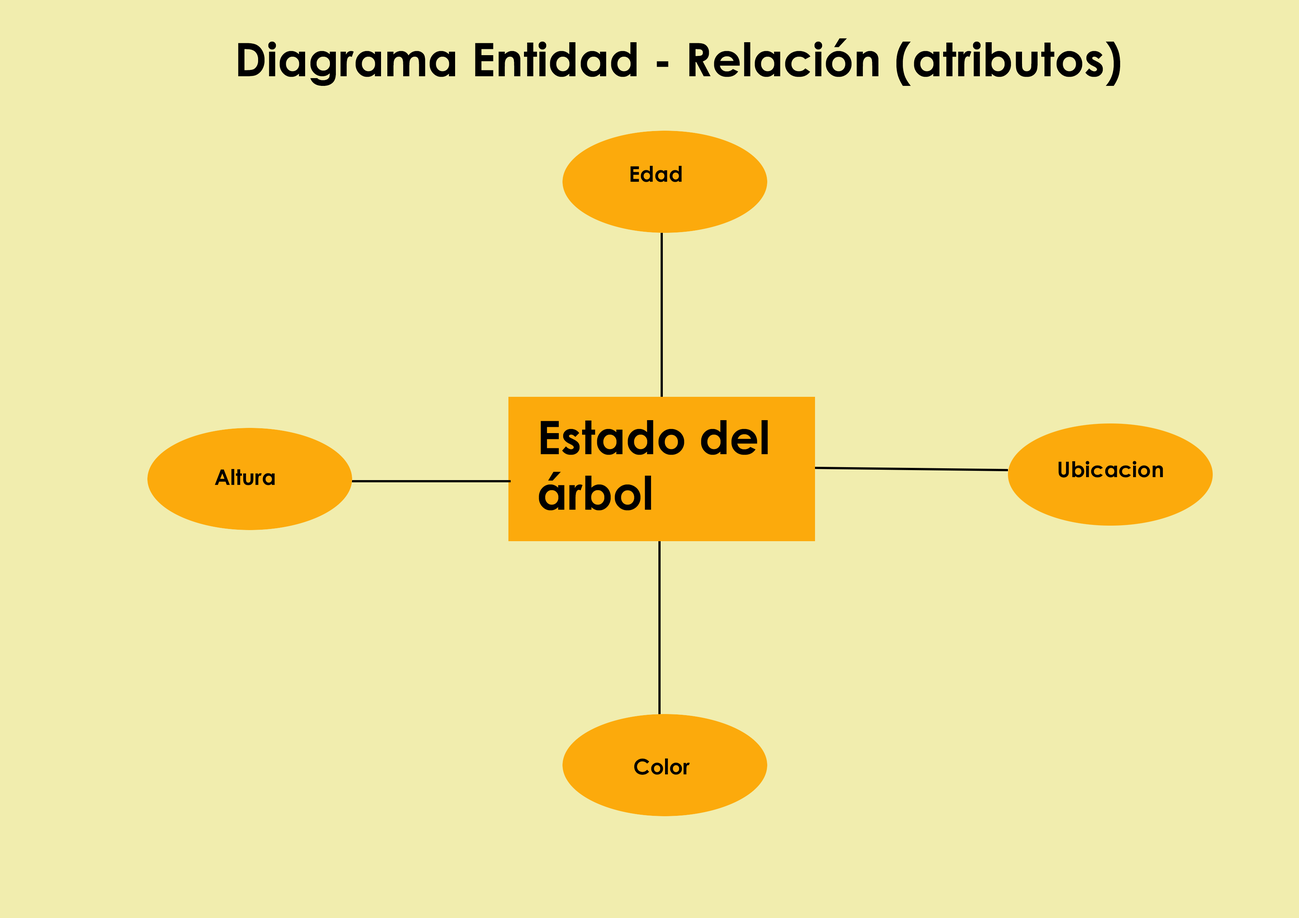
<style>
.page{position:relative;width:1299px;height:918px;background:#f1edae}
.page>*{position:absolute;margin:0}
.t1{font:46.3px "CenturyGothic-Bold";color:#000000}
.t2{font:21.6px "CenturyGothic-Bold";color:#000000}
</style>
<div class="page">
<p class="t1" style="left:238px;top:38px;width:882px;height:48px">Diagrama Entidad - Relación (atributos)</p>
<p class="t2" style="left:630px;top:166px;width:52px;height:16px">Edad</p>
<p class="t1" style="left:539px;top:420px;width:229px;height:91px">Estado del árbol</p>
<p class="t2" style="left:1058px;top:461px;width:105px;height:17px">Ubicacion</p>
<p class="t2" style="left:215px;top:469px;width:60px;height:16px">Altura</p>
<p class="t2" style="left:634px;top:759px;width:56px;height:16px">Color</p>
</div>
